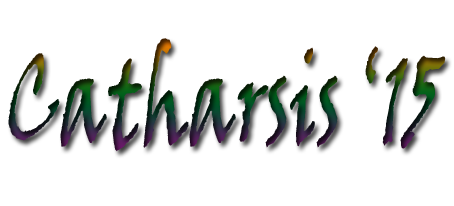
<style>
.page{position:relative;width:454px;height:206px;background:#ffffff}
.page>*{position:absolute;margin:0}
.t1{font:124.1px "VinerHandITC";scale:0.6 1}
</style>
<div class="page">
<p class="t1" style="left:8px;top:38px;width:438px;height:114px">Catharsis ‘15</p>
</div>
